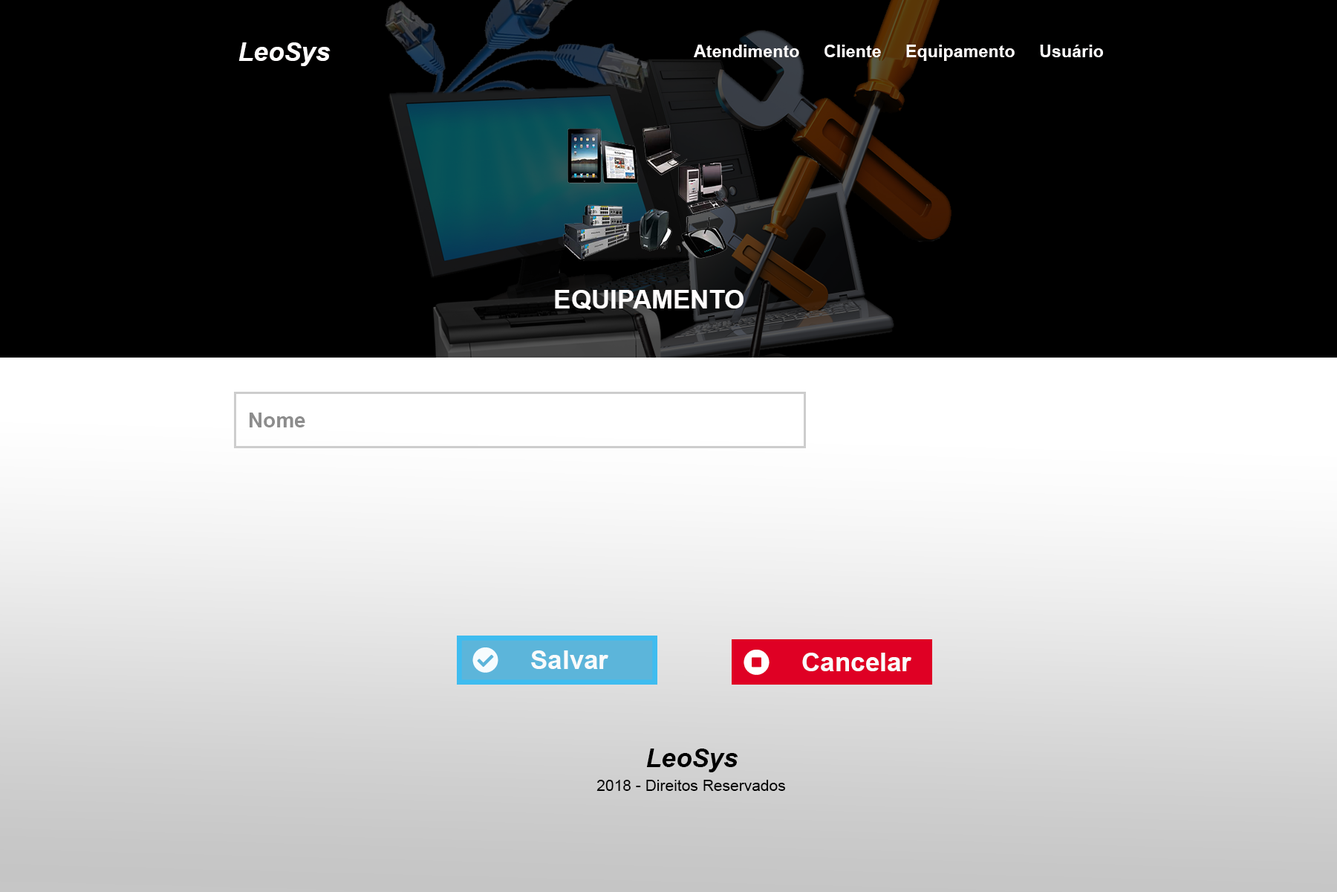
<style>
.page{position:relative;width:1337px;height:892px;background:#000000}
.page>*{position:absolute;margin:0}
.t1{font:44.6px "Arial-BoldItalicMT";color:#fffdfd}
.t2{font:29.7px "Arial-BoldMT";color:#fffdfd}
.t3{font:44.6px "Arial-BoldMT";color:#fffdfd}
.t4{font:35.7px "Arial-BoldMT";color:#8d8d8d}
.t5{font:44.6px "Arial-BoldMT";color:#fafbfb}
.t6{font:44.6px "Arial-BoldItalicMT";color:#000000}
.t7{font:26.7px "ArialMT";color:#000000}
</style>
<div class="page">
<p class="t1" style="left:239px;top:42px;width:92px;height:24px">LeoSys</p>
<p class="t2" style="left:694px;top:45px;width:409px;height:16px">Atendimento     Cliente     Equipamento     Usuário</p>
<p class="t3" style="left:555px;top:290px;width:189px;height:20px">EQUIPAMENTO</p>
<p class="t4" style="left:250px;top:412px;width:55px;height:15px">Nome</p>
<p class="t5" style="left:531px;top:650px;width:78px;height:19px">Salvar</p>
<p class="t5" style="left:802px;top:652px;width:110px;height:19px">Cancelar</p>
<p class="t6" style="left:646px;top:748px;width:93px;height:24px">LeoSys</p>
<p class="t7" style="left:597px;top:779px;width:189px;height:12px">2018 - Direitos Reservados</p>
</div>
